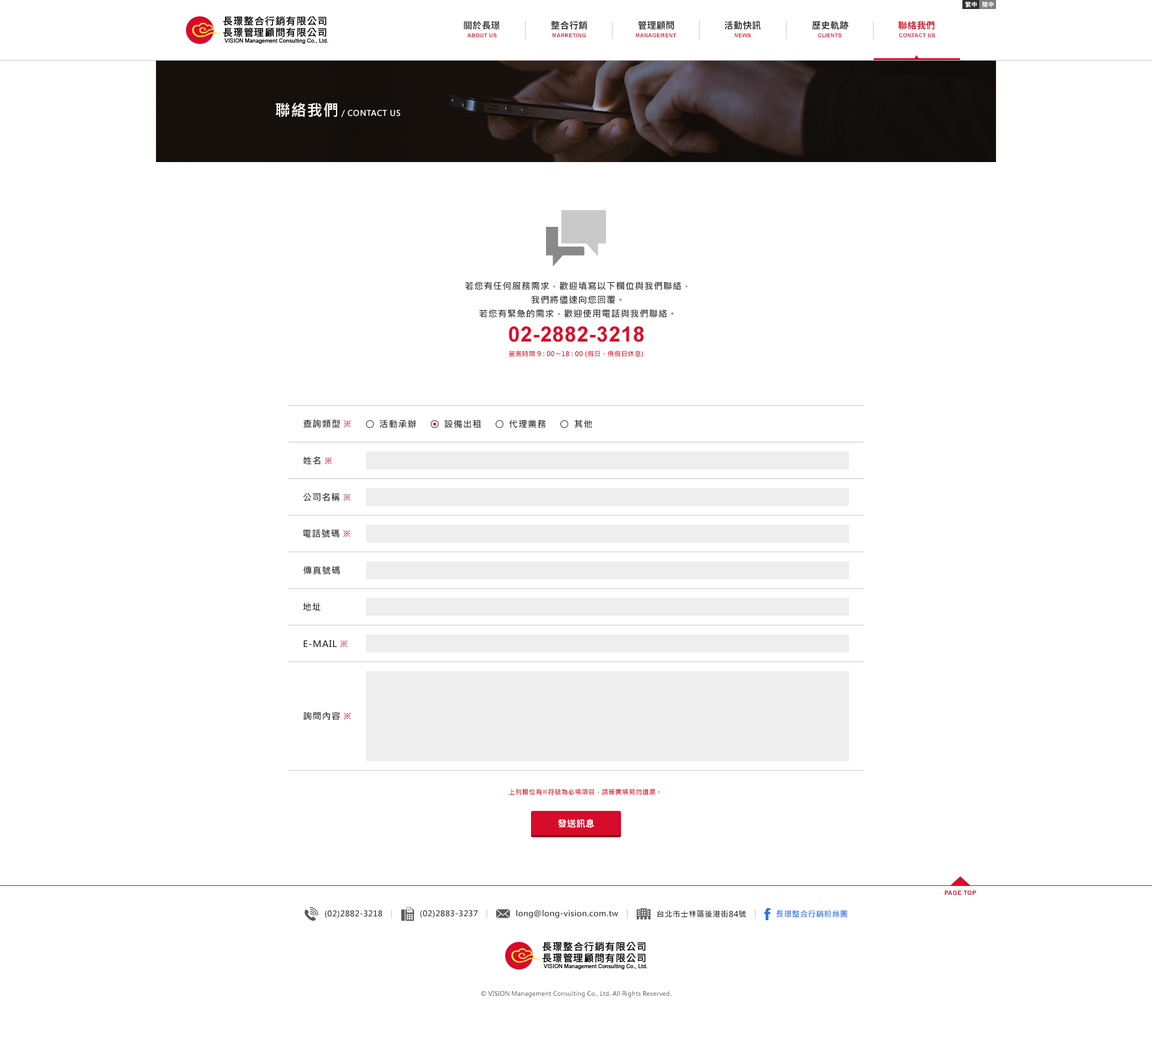
<style>
.page{position:relative;width:1152px;height:1045px;background:#ffffff}
.page>*{position:absolute;margin:0}
.t1{font:6px "NotoSansCJKtc-Bold";letter-spacing:0.03em;color:#ffffff}
.t2{font:9px "NotoSansCJKtc-Bold";letter-spacing:0.03em;color:#313131}
.t3{font:9px "NotoSansCJKtc-Bold";letter-spacing:0.03em;color:#d70b2a}
.t4{font:5.4px "Arial-BoldMT";letter-spacing:0.03em;color:#d70b2a;text-transform:uppercase}
.t5{font:7.8px "MicrosoftJhengHeiBold";letter-spacing:0.05em;color:#ffffff}
.t6{font:15.6px "MicrosoftJhengHeiBold";letter-spacing:0.03em;color:#ffffff}
.t7{font:9px/13.8px "MicrosoftJhengHeiBold";letter-spacing:0.05em;color:#313131}
.t8{font:21px "Arial-BoldMT";letter-spacing:0.025em;color:#d70b2a}
.t9{font:6.6px "MicrosoftJhengHeiBold";letter-spacing:0.02em;color:#d70b2a}
.t10{font:9px "MicrosoftJhengHeiBold";letter-spacing:0.05em;color:#313131}
.t11{font:9px "MicrosoftJhengHeiBold";letter-spacing:0.05em;color:#d70b2a}
.t12{font:9px "NotoSansCJKtc-Bold";letter-spacing:0.03em;color:#ffffff}
.t13{font:6px "Arial-BoldMT";letter-spacing:0.03em;color:#d70b2a}
.t14{font:7.8px "MicrosoftJhengHeiBold";letter-spacing:0.03em;color:#313131}
.t15{font:7.8px "MicrosoftJhengHeiBold";letter-spacing:0.03em;color:#2b75da}
.t16{font:6px "MicrosoftJhengHeiRegular";letter-spacing:0.03em;color:#313131}
</style>
<div class="page">
<p class="t1" style="left:965px;top:1px;width:12px;height:7px">繁中</p>
<p class="t1" style="left:982px;top:1px;width:12px;height:7px">簡中</p>
<p class="t2" style="left:464px;top:20px;width:36px;height:10px">關於長璟</p>
<p class="t2" style="left:551px;top:20px;width:36px;height:10px">整合行銷</p>
<p class="t2" style="left:638px;top:21px;width:36px;height:9px">管理顧問</p>
<p class="t2" style="left:724px;top:20px;width:37px;height:10px">活動快訊</p>
<p class="t2" style="left:812px;top:20px;width:36px;height:10px">歷史軌跡</p>
<p class="t3" style="left:898px;top:21px;width:37px;height:9px">聯絡我們</p>
<p class="t4" style="left:467px;top:33px;width:30px;height:4px">About Us</p>
<p class="t4" style="left:552px;top:33px;width:34px;height:4px">MARKETING</p>
<p class="t4" style="left:635px;top:33px;width:41px;height:4px">MANAGEMENT</p>
<p class="t4" style="left:734px;top:33px;width:17px;height:4px">NEWS</p>
<p class="t4" style="left:818px;top:33px;width:24px;height:4px">CLIENTS</p>
<p class="t4" style="left:899px;top:33px;width:36px;height:4px">CONTACT US</p>
<p class="t5" style="left:275px;top:103px;width:125px;height:14px"><span class="t6">聯絡我們</span> / CONTACT US</p>
<p class="t7" style="left:465px;top:281px;width:223px;height:36px;text-align:center">若您有任何服務需求，歡迎填寫以下欄位與我們聯絡，<br>我們將儘速向您回覆。<br>若您有緊急的需求，歡迎使用電話與我們聯絡。</p>
<p class="t8" style="left:509px;top:326px;width:135px;height:16px">02-2882-3218</p>
<p class="t9" style="left:509px;top:350px;width:134px;height:8px">營業時間 9 : 00〜18 : 00 (假日、例假日休息)</p>
<p class="t10" style="left:304px;top:419px;width:47px;height:9px">查詢類型 <span class="t11">※</span></p>
<p class="t10" style="left:380px;top:419px;width:36px;height:9px">活動承辦</p>
<p class="t10" style="left:445px;top:419px;width:36px;height:9px">設備出租</p>
<p class="t10" style="left:509px;top:419px;width:37px;height:9px">代理業務</p>
<p class="t10" style="left:574px;top:419px;width:18px;height:9px">其他</p>
<p class="t10" style="left:303px;top:456px;width:29px;height:8px">姓名 <span class="t11">※</span></p>
<p class="t10" style="left:303px;top:493px;width:48px;height:8px">公司名稱 <span class="t11">※</span></p>
<p class="t10" style="left:303px;top:529px;width:47px;height:9px">電話號碼 <span class="t11">※</span></p>
<p class="t10" style="left:304px;top:566px;width:36px;height:8px">傳真號碼</p>
<p class="t10" style="left:303px;top:602px;width:17px;height:9px">地址</p>
<p class="t10" style="left:304px;top:640px;width:43px;height:7px">E-MAIL <span class="t11">※</span></p>
<p class="t10" style="left:304px;top:712px;width:47px;height:8px">詢問內容 <span class="t11">※</span></p>
<p class="t9" style="left:509px;top:788px;width:151px;height:7px">上列欄位有※符號為必填項目，請確實填寫勿遺漏。</p>
<p class="t12" style="left:557px;top:818px;width:37px;height:9px">發送訊息</p>
<p class="t13" style="left:944px;top:890px;width:32px;height:5px">PAGE TOP</p>
<p class="t14" style="left:325px;top:910px;width:57px;height:7px">(02)2882-3218</p>
<p class="t14" style="left:420px;top:910px;width:58px;height:7px">(02)2883-3237</p>
<p class="t14" style="left:516px;top:910px;width:102px;height:8px">long@long-vision.com.tw</p>
<p class="t14" style="left:657px;top:910px;width:89px;height:7px">台北市士林區後港街84號</p>
<p class="t15" style="left:776px;top:910px;width:71px;height:7px">長璟整合行銷粉絲團</p>
<p class="t16" style="left:481px;top:991px;width:190px;height:6px">© VISION Management Consulting Co., Ltd. All Rights Reserved.</p>
</div>
